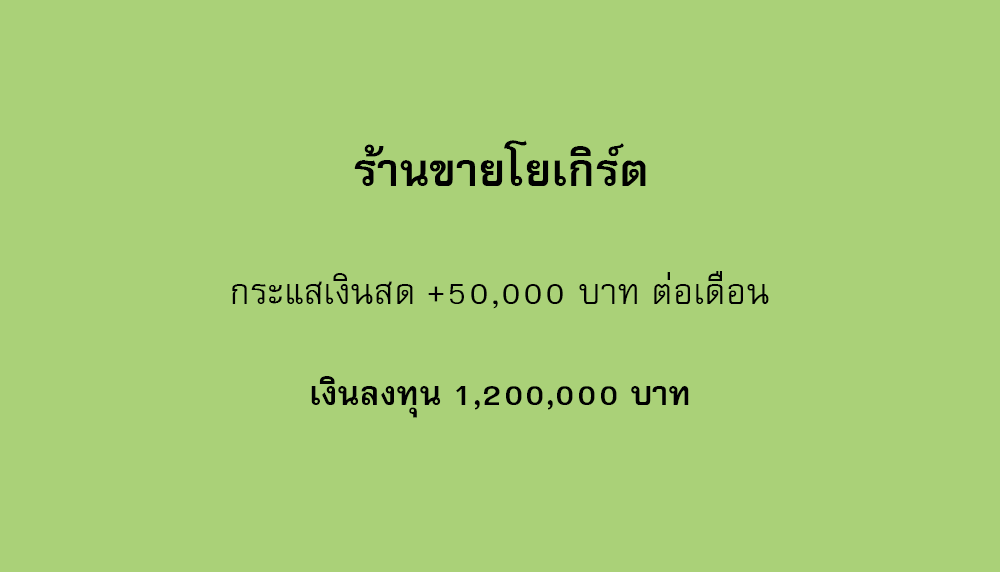
<style>
.page{position:relative;width:1000px;height:572px;background:#aad178}
.page>*{position:absolute;margin:0}
.t1{font:64px "FreesiaUPCBold";color:#000000}
.t2{font:50px "FreesiaUPC";color:#000000}
.t3{font:47px "FreesiaUPCBold";color:#000000}
</style>
<div class="page">
<p class="t1" style="left:354px;top:140px;width:292px;height:46px">ร้านขายโยเกิร์ต</p>
<p class="t2" style="left:232px;top:271px;width:537px;height:38px">กระแสเงินสด +50,000 บาท ต่อเดือน</p>
<p class="t3" style="left:311px;top:376px;width:378px;height:42px">เงินลงทุน 1,200,000 บาท</p>
</div>
